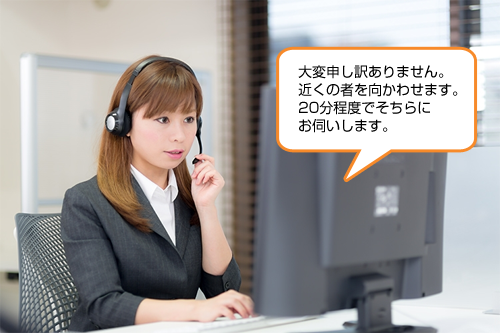
<style>
.page{position:relative;width:500px;height:333px}
.page>*{position:absolute;margin:0}
.t1{font:14px/18px "ShinGoPro-Regular";color:#000000}
.t2{font:14px/14px "ShinGoPro-Regular";color:#000000}
</style>
<div class="page">
<p class="t1" style="left:298px;top:65px;width:160px;height:68px"><span class="t2">大</span>変申し訳ありません。<br>近くの者を向かわせます。<br>20分程度でそちらに<br>お伺いします。</p>
</div>
